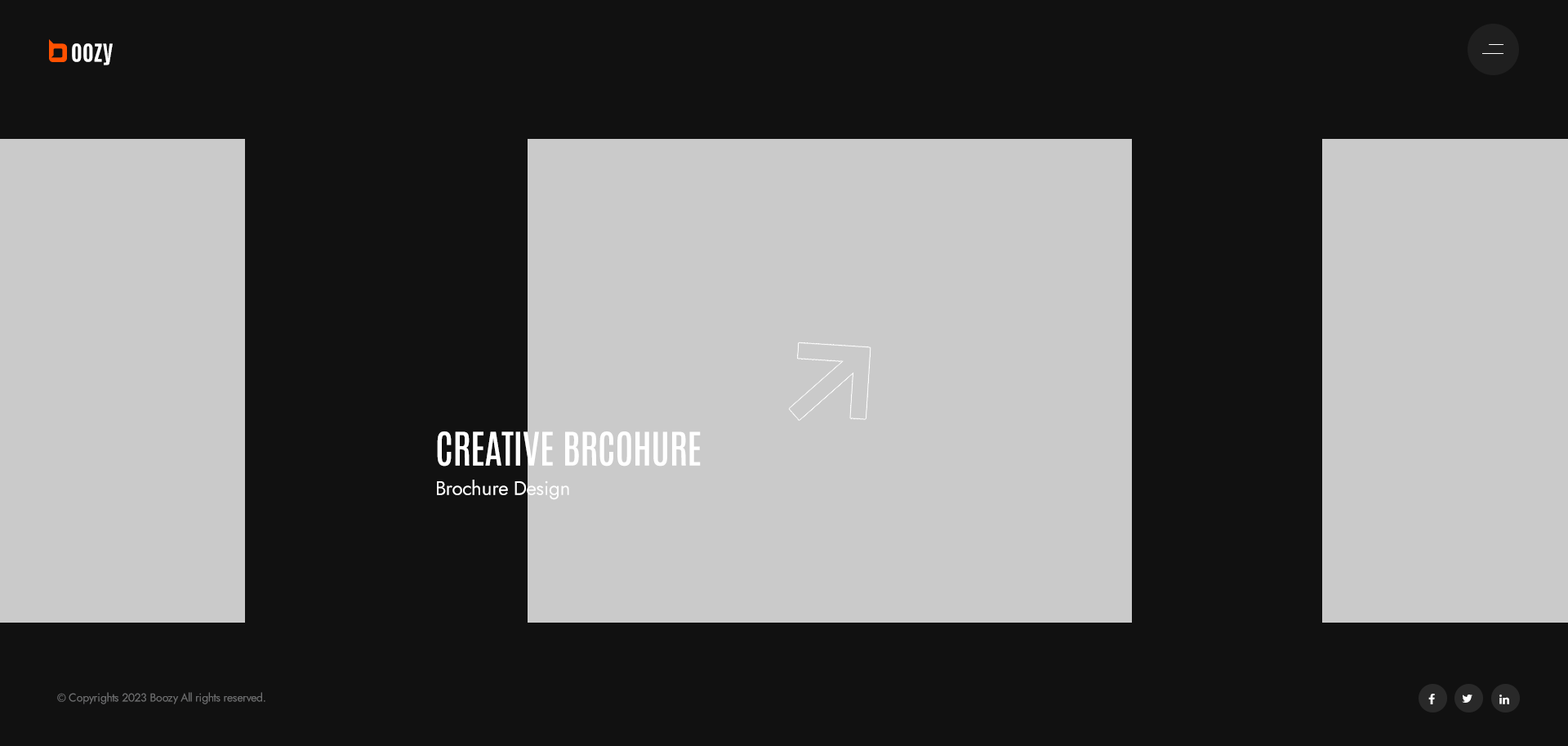
<style>
.page{position:relative;width:1568px;height:746px;background:#111111}
.page>*{position:absolute;margin:0}
.t1{font:24.5px "Antonio-Bold";color:#ffffff}
.t2{font:39.2px/29.4px "Antonio-Medium";letter-spacing:-0.01em;color:#ffffff;text-transform:uppercase}
.t3{font:19.6px/29.4px "Jost-Regular";letter-spacing:-0.01em;color:#ffffff}
.t4{font:11.4px "Jost-Regular";letter-spacing:-0.025em;color:#6f7071}
</style>
<div class="page">
<p class="t1" style="left:72px;top:43px;width:41px;height:22px">oozy</p>
<p class="t2" style="left:437px;top:431px;width:264px;height:69px">cREATIVE bRCOHURE<br><span class="t3">Brochure Design</span></p>
<p class="t4" style="left:57px;top:692px;width:208px;height:12px">© Copyrights 2023 Boozy All rights reserved.</p>
</div>
